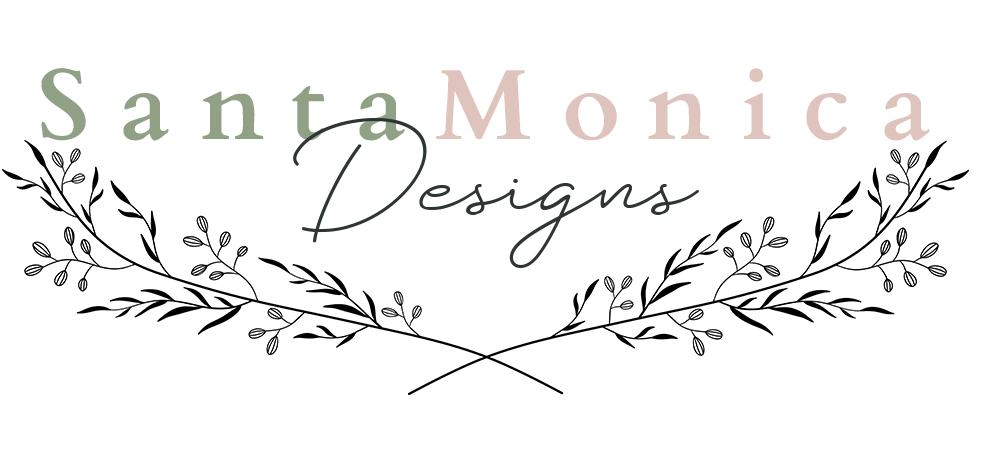
<style>
.page{position:relative;width:991px;height:452px;background:#ffffff}
.page>*{position:absolute;margin:0}
.t1{font:100px "Cardo-Bold";letter-spacing:0.3em;color:#dec4bd}
.t2{font:100px "Cardo-Bold";letter-spacing:0.3em;color:#90a185}
.t3{font:141.7px "Silhouette";color:#2f3535}
</style>
<div class="page">
<p class="t1" style="left:41px;top:68px;width:889px;height:73px"><span class="t2">Santa</span>Monica</p>
<p class="t3" style="left:293px;top:118px;width:406px;height:150px">Designs</p>
</div>
